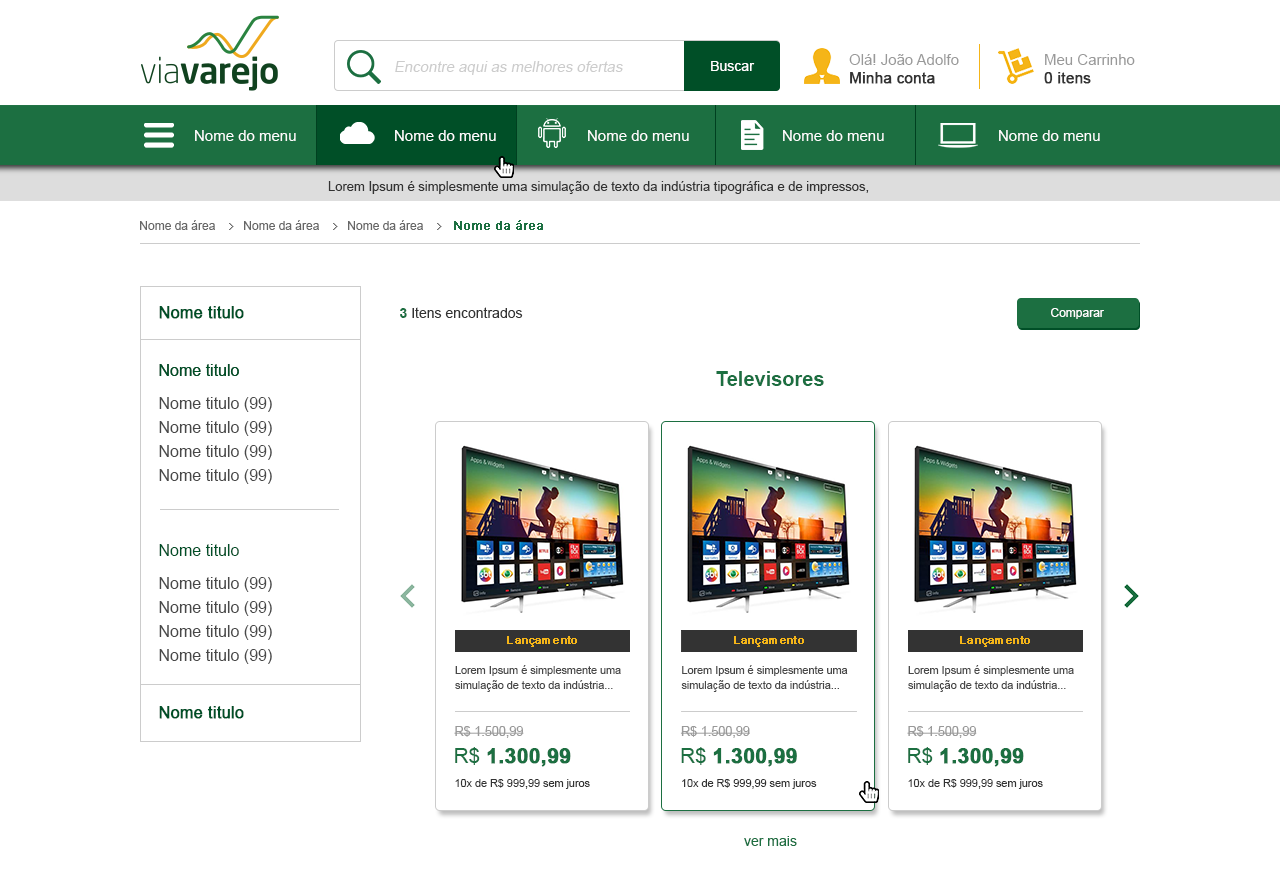
<style>
.page{position:relative;width:1280px;height:874px;background:#ffffff}
.page>*{position:absolute;margin:0}
.t1{font:15px "ArialMT";color:#999999}
.t2{font:15px "ArialMT";color:#333333;font-weight:bold}
.t3{font:15px "ArialMT";color:#cccccc;font-style:italic}
.t4{font:14px "ArialMT";color:#ffffff}
.t5{font:15px "ArialMT";color:#fefefe}
.t6{font:13px "ArialMT";color:#333333}
.t7{font:12px "ArialMT";color:#666666}
.t8{font:12px "ArialMT";color:#1c6f41;font-weight:bold}
.t9{font:16px "ArialMT";color:#004f27;font-weight:bold}
.t10{font:14px "ArialMT";color:#333333}
.t11{font:14px "Arial-BoldMT";color:#1c6f41}
.t12{font:12px "ArialMT";color:#ffffff}
.t13{font:16px "ArialMT";color:#004f27}
.t14{font:20px "Arial-BoldMT";color:#1c6f41}
.t15{font:16px/24px "ArialMT";color:#484848}
.t16{font:10.8px "ArialMT";color:#f5b518;font-weight:bold}
.t17{font:10.8px/14.4px "ArialMT";color:#484848}
.t18{font:12.6px "ArialMT";color:#999999}
.t19{font:20.8px "Arial-BoldMT";color:#1c6f41;font-weight:bold}
.t20{font:20.8px "ArialMT";color:#1c6f41}
.t21{font:10.8px "ArialMT";color:#333333}
.t22{font:14px "ArialMT";color:#1c6f41}
</style>
<div class="page">
<p class="t1" style="left:849px;top:54px;width:110px;height:30px">Olá! João Adolfo<br><span class="t2">Minha conta</span></p>
<p class="t1" style="left:1044px;top:54px;width:91px;height:30px">Meu Carrinho<br><span class="t2">0 itens</span></p>
<p class="t3" style="left:395px;top:61px;width:228px;height:14px">Encontre aqui as melhores ofertas</p>
<p class="t4" style="left:711px;top:61px;width:44px;height:10px">Buscar</p>
<p class="t5" style="left:195px;top:130px;width:101px;height:11px">Nome do menu</p>
<p class="t5" style="left:395px;top:130px;width:101px;height:11px">Nome do menu</p>
<p class="t5" style="left:588px;top:130px;width:101px;height:11px">Nome do menu</p>
<p class="t5" style="left:783px;top:130px;width:101px;height:11px">Nome do menu</p>
<p class="t5" style="left:999px;top:130px;width:101px;height:11px">Nome do menu</p>
<p class="t6" style="left:328px;top:181px;width:541px;height:13px">Lorem Ipsum é simplesmente uma simulação de texto da indústria tipográfica e de impressos,</p>
<p class="t7" style="left:140px;top:220px;width:75px;height:10px">Nome da área</p>
<p class="t7" style="left:244px;top:220px;width:75px;height:10px">Nome da área</p>
<p class="t7" style="left:348px;top:220px;width:75px;height:10px">Nome da área</p>
<p class="t8" style="left:454px;top:220px;width:89px;height:10px">Nome da área</p>
<p class="t9" style="left:159px;top:306px;width:85px;height:13px">Nome titulo</p>
<p class="t10" style="left:400px;top:307px;width:123px;height:11px"><span class="t11">3</span> Itens encontrados</p>
<p class="t12" style="left:1051px;top:308px;width:53px;height:11px">Comparar</p>
<p class="t13" style="left:159px;top:364px;width:80px;height:12px">Nome titulo</p>
<p class="t13" style="left:159px;top:364px;width:80px;height:12px">Nome titulo</p>
<p class="t14" style="left:716px;top:371px;width:108px;height:15px">Televisores</p>
<p class="t15" style="left:159px;top:397px;width:113px;height:87px">Nome titulo (99)<br>Nome titulo (99)<br>Nome titulo (99)<br>Nome titulo (99)</p>
<p class="t13" style="left:159px;top:544px;width:80px;height:12px">Nome titulo</p>
<p class="t15" style="left:159px;top:577px;width:113px;height:87px">Nome titulo (99)<br>Nome titulo (99)<br>Nome titulo (99)<br>Nome titulo (99)</p>
<p class="t16" style="left:507px;top:636px;width:70px;height:11px">Lançamento</p>
<p class="t16" style="left:734px;top:636px;width:70px;height:11px">Lançamento</p>
<p class="t16" style="left:960px;top:636px;width:70px;height:11px">Lançamento</p>
<p class="t17" style="left:455px;top:665px;width:166px;height:27px">Lorem Ipsum é simplesmente uma simulação de texto da indústria...</p>
<p class="t17" style="left:681px;top:665px;width:167px;height:27px">Lorem Ipsum é simplesmente uma simulação de texto da indústria...</p>
<p class="t17" style="left:908px;top:665px;width:166px;height:27px">Lorem Ipsum é simplesmente uma simulação de texto da indústria...</p>
<p class="t9" style="left:159px;top:706px;width:85px;height:13px">Nome titulo</p>
<p class="t18" style="left:454px;top:726px;width:70px;height:12px">R$ 1.500,99</p>
<p class="t18" style="left:680px;top:726px;width:70px;height:12px">R$ 1.500,99</p>
<p class="t18" style="left:907px;top:726px;width:70px;height:12px">R$ 1.500,99</p>
<p class="t19" style="left:455px;top:747px;width:116px;height:20px"><span class="t20">R$ </span>1.300,99</p>
<p class="t19" style="left:681px;top:747px;width:116px;height:20px"><span class="t20">R$ </span>1.300,99</p>
<p class="t19" style="left:908px;top:747px;width:116px;height:20px"><span class="t20">R$ </span>1.300,99</p>
<p class="t21" style="left:455px;top:779px;width:135px;height:10px">10x de R$ 999,99 sem juros</p>
<p class="t21" style="left:682px;top:779px;width:135px;height:10px">10x de R$ 999,99 sem juros</p>
<p class="t21" style="left:908px;top:779px;width:135px;height:10px">10x de R$ 999,99 sem juros</p>
<p class="t22" style="left:744px;top:836px;width:53px;height:10px">ver mais</p>
</div>
